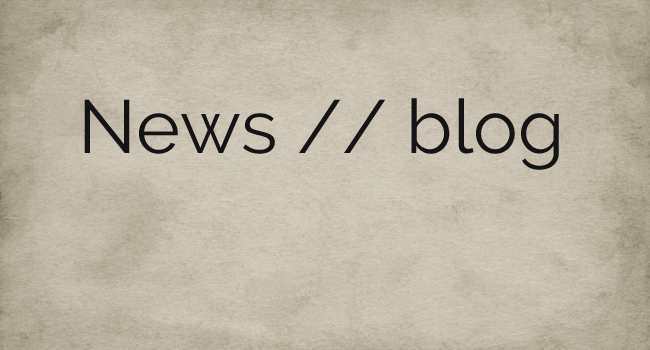
<style>
.page{position:relative;width:650px;height:350px}
.page>*{position:absolute;margin:0}
.t1{font:75px "Raleway-Regular";color:#141414}
</style>
<div class="page">
<p class="t1" style="left:84px;top:98px;width:475px;height:72px">News // blog</p>
</div>
